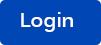
<style>
.page{position:relative;width:101px;height:45px;background:#0046b4}
.page>*{position:absolute;margin:0}
.t1{font:20px "Kalinga-Bold";color:#ffffff}
</style>
<div class="page">
<p class="t1" style="left:21px;top:12px;width:52px;height:20px">Login</p>
</div>
